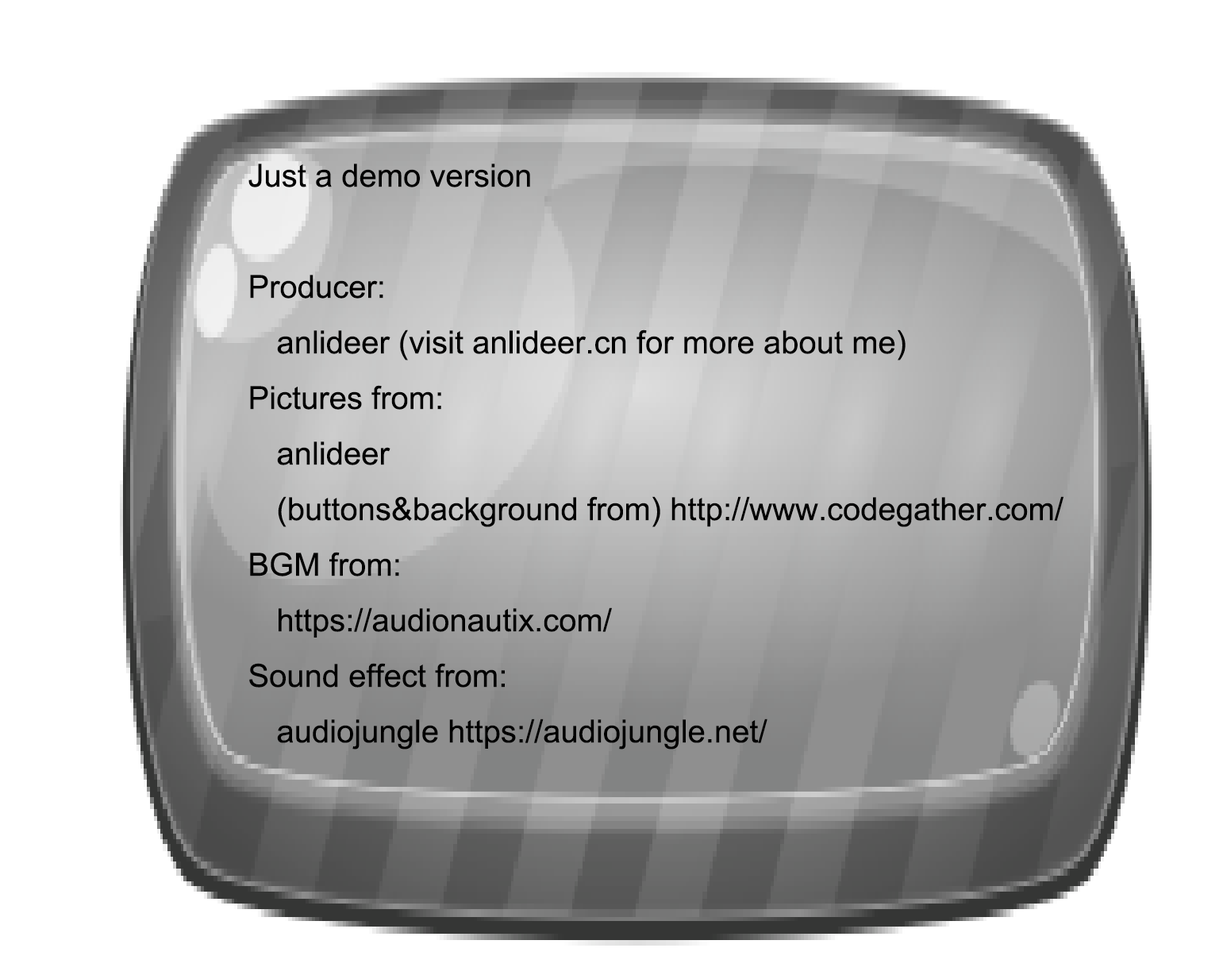
<style>
.page{position:relative;width:1223px;height:975px;background:#ffffff}
.page>*{position:absolute;margin:0}
.t1{font:31.7px "ArialMT";color:#000000}
</style>
<div class="page">
<p class="t1" style="left:248px;top:164px;width:816px;height:585px">Just a demo version<br><br>Producer: <br> anlideer (visit anlideer.cn for more about me)<br>Pictures from:<br> anlideer<br> (buttons&amp;background from) http://www.codegather.com/<br>BGM from:<br> https://audionautix.com/<br>Sound effect from:<br> audiojungle https://audiojungle.net/</p>
</div>
